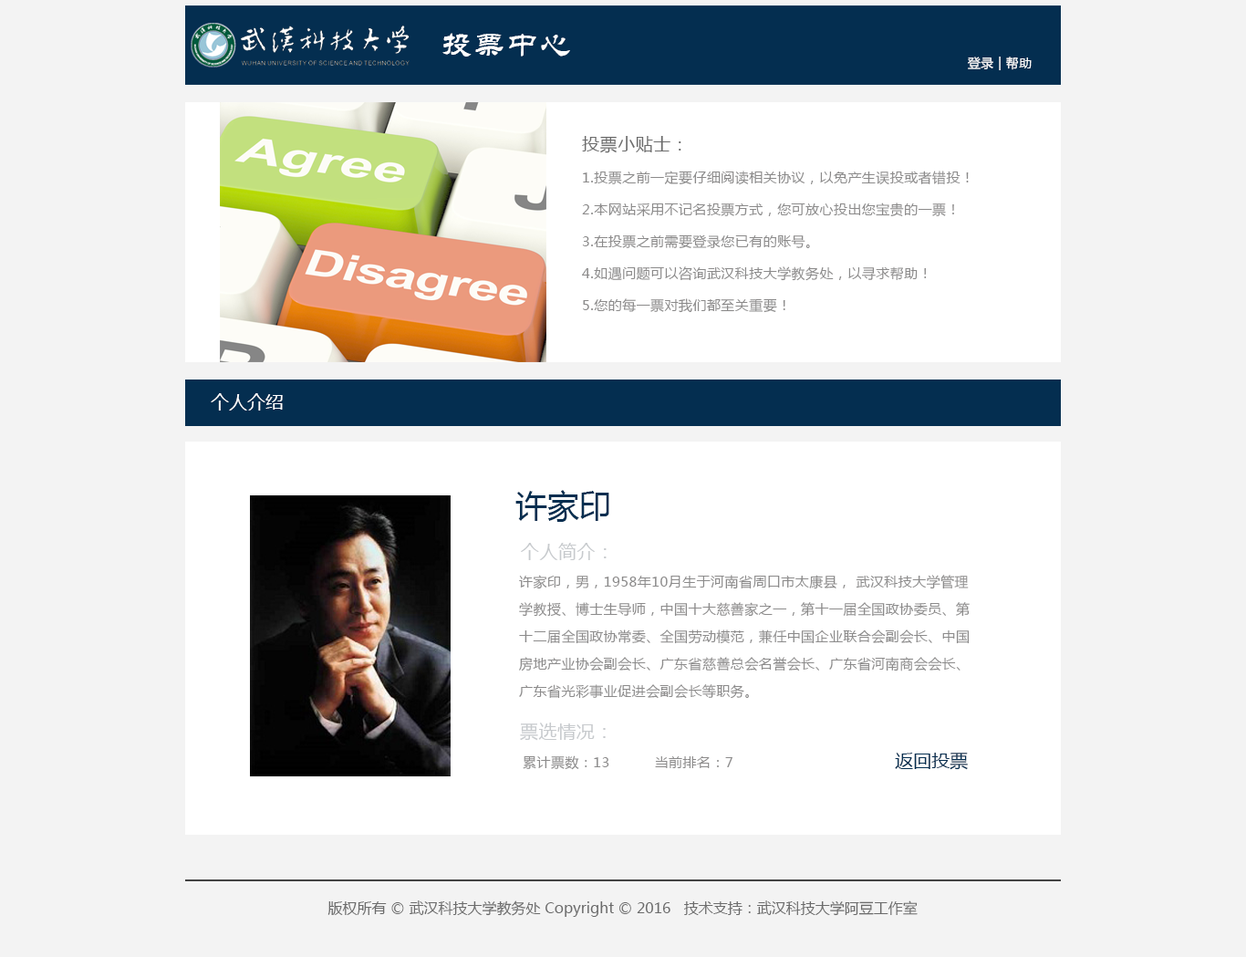
<style>
.page{position:relative;width:1246px;height:957px;background:#f3f3f3}
.page>*{position:absolute;margin:0}
.t1{font:31.9px "STLiti";letter-spacing:0.025em;color:#ffffff}
.t2{font:12.8px "MicrosoftYaHei";letter-spacing:0.025em;color:#ffffff}
.t3{font:13.7px/31.9px "MicrosoftYaHei";letter-spacing:0.03em;color:#8b8a8a}
.t4{font:17.3px/31.9px "MicrosoftYaHei";letter-spacing:0.03em;color:#6b6b6b}
.t5{font:18.2px "MicrosoftYaHei";color:#ffffff}
.t6{font:31.9px "MicrosoftYaHei";color:#042e50}
.t7{font:18.2px "MicrosoftYaHei";letter-spacing:0.03em;color:#c7cacd}
.t8{font:13.7px/27.4px "MicrosoftYaHei";letter-spacing:0.03em;color:#8c8b8b}
.t9{font:13.7px "MicrosoftYaHei";letter-spacing:0.03em;color:#8c8b8b}
.t10{font:18.2px "MicrosoftYaHei";color:#042e50}
.t11{font:14.6px "MicrosoftYaHei";color:#6b6b6b}
</style>
<div class="page">
<p class="t1" style="left:442px;top:33px;width:128px;height:24px">投票中心</p>
<p class="t2" style="left:968px;top:57px;width:64px;height:13px">登录 | 帮助</p>
<p class="t3" style="left:582px;top:136px;width:387px;height:177px"><span class="t4">投票小贴士：<br></span>1.投票之前一定要仔细阅读相关协议，以免产生误投或者错投！<br>2.本网站采用不记名投票方式，您可放心投出您宝贵的一票！<br>3.在投票之前需要登录您已有的账号。<br>4.如遇问题可以咨询武汉科技大学教务处，以寻求帮助！<br>5.您的每一票对我们都至关重要！</p>
<p class="t5" style="left:211px;top:393px;width:72px;height:18px">个人介绍</p>
<p class="t6" style="left:515px;top:490px;width:94px;height:32px">许家印</p>
<p class="t7" style="left:521px;top:543px;width:86px;height:17px">个人简介：</p>
<p class="t8" style="left:519px;top:575px;width:451px;height:124px">许家印，男，1958年10月生于河南省周口市太康县， 武汉科技大学管理<br>                 学教授、博士生导师，中国十大慈善家之一，第十一届全国政协委员、第<br>                 十二届全国政协常委、全国劳动模范，兼任中国企业联合会副会长、中国<br>                 房地产业协会副会长、广东省慈善总会名誉会长、广东省河南商会会长、<br>                 广东省光彩事业促进会副会长等职务。</p>
<p class="t7" style="left:520px;top:722px;width:86px;height:19px">票选情况：</p>
<p class="t9" style="left:523px;top:755px;width:210px;height:15px">累计票数：13          当前排名：7</p>
<p class="t10" style="left:895px;top:753px;width:73px;height:17px">返回投票</p>
<p class="t11" style="left:327px;top:900px;width:591px;height:17px">版权所有 © 武汉科技大学教务处 Copyright © 2016   技术支持：武汉科技大学阿豆工作室</p>
</div>
